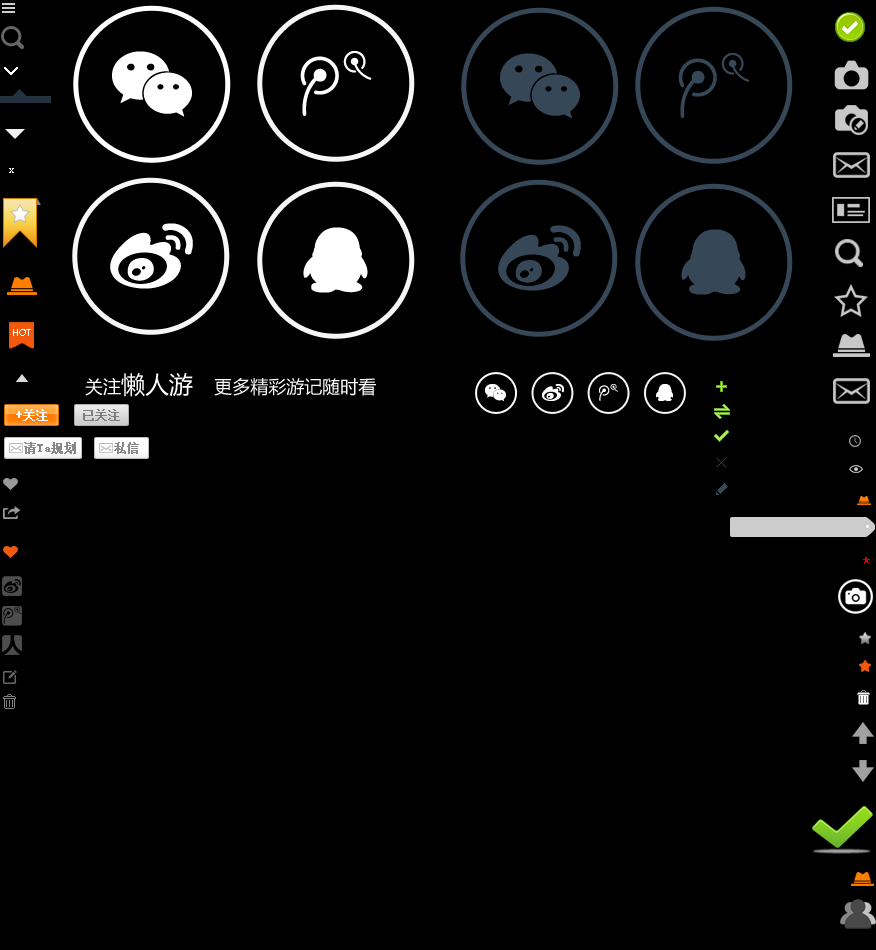
<style>
.page{position:relative;width:876px;height:950px;background:#000000}
.page>*{position:absolute;margin:0}
.t1{font:9px "MicrosoftYaHei";color:#ffffff}
.t2{font:12px "SimSun";color:#ffffff;font-weight:bold}
.t3{font:12px "SimSun";color:#7d7d7d;font-weight:bold}
.t4{font:12px "SimSun";color:#898989;font-weight:bold}
.t5{font:14px "MicrosoftYaHei";color:#e20000;font-weight:bold}
</style>
<div class="page">
<p class="t1" style="left:13px;top:329px;width:18px;height:7px">HOT</p>
<p class="t2" style="left:16px;top:409px;width:32px;height:12px">+关注</p>
<p class="t3" style="left:83px;top:409px;width:37px;height:12px">已关注</p>
<p class="t4" style="left:24px;top:442px;width:52px;height:12px">请Ta规划</p>
<p class="t4" style="left:114px;top:442px;width:25px;height:12px">私信</p>
<p class="t5" style="left:863px;top:557px;width:7px;height:6px">*</p>
</div>
